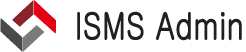
<style>
.page{position:relative;width:246px;height:52px;background:#ffffff}
.page>*{position:absolute;margin:0}
.t1{font:36px "New-Gulim";color:#202020;font-weight:bold;scale:0.8 1}
</style>
<div class="page">
<p class="t1" style="left:77px;top:11px;width:165px;height:30px">ISMS Admin</p>
</div>
